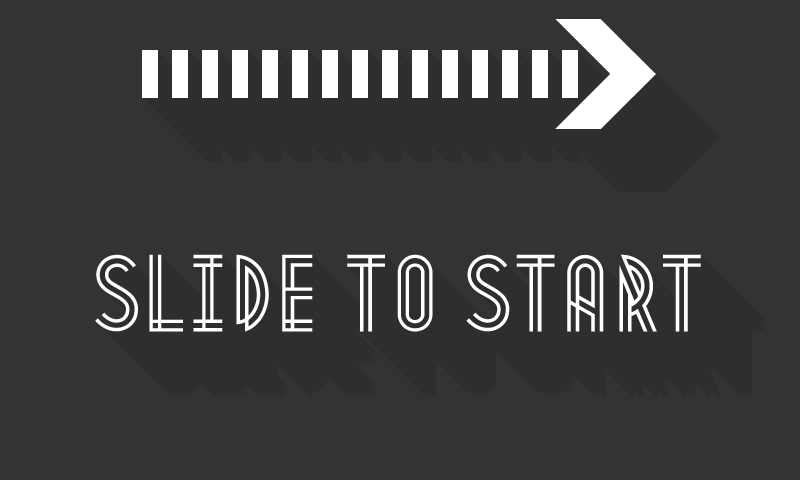
<style>
.page{position:relative;width:800px;height:480px;background:#333333}
.page>*{position:absolute;margin:0}
.t1{font:96px "Metropolis1920";letter-spacing:0.032em;color:#ffffff}
</style>
<div class="page">
<p class="t1" style="left:95px;top:254px;width:606px;height:78px">SLide TO START</p>
</div>
